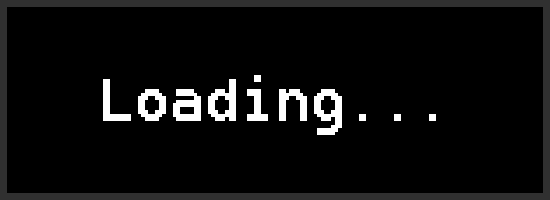
<style>
.page{position:relative;width:550px;height:200px;background:#000000}
.page>*{position:absolute;margin:0}
.t1{font:75px "8514oem";color:#ffffff}
</style>
<div class="page">
<p class="t1" style="left:103px;top:75px;width:333px;height:60px">Loading...</p>
</div>
